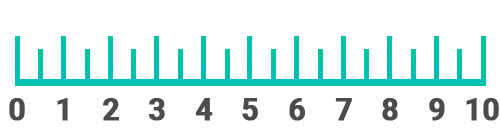
<style>
.page{position:relative;width:500px;height:132px;background:#ffffff}
.page>*{position:absolute;margin:0}
.t1{font:30px "Roboto-Bold";color:#4c4c4c;font-weight:bold}
</style>
<div class="page">
<p class="t1" style="left:9px;top:98px;width:16px;height:23px">0</p>
<p class="t1" style="left:57px;top:98px;width:11px;height:23px">1</p>
<p class="t1" style="left:103px;top:98px;width:16px;height:23px">2</p>
<p class="t1" style="left:148px;top:98px;width:17px;height:23px">3</p>
<p class="t1" style="left:195px;top:98px;width:18px;height:23px">4</p>
<p class="t1" style="left:242px;top:98px;width:16px;height:23px">5</p>
<p class="t1" style="left:289px;top:98px;width:16px;height:23px">6</p>
<p class="t1" style="left:335px;top:98px;width:17px;height:23px">7</p>
<p class="t1" style="left:382px;top:98px;width:16px;height:23px">8</p>
<p class="t1" style="left:429px;top:98px;width:16px;height:23px">9</p>
<p class="t1" style="left:466px;top:98px;width:33px;height:23px">10</p>
</div>
